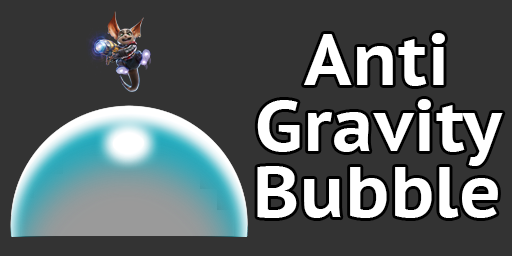
<style>
.page{position:relative;width:512px;height:256px;background:#333333}
.page>*{position:absolute;margin:0}
.t1{font:72px/66px "PTSans-CaptionBold";color:#ffffff}
</style>
<div class="page">
<p class="t1" style="left:257px;top:33px;width:246px;height:185px;text-align:center">Anti<br>Gravity<br>Bubble</p>
</div>
